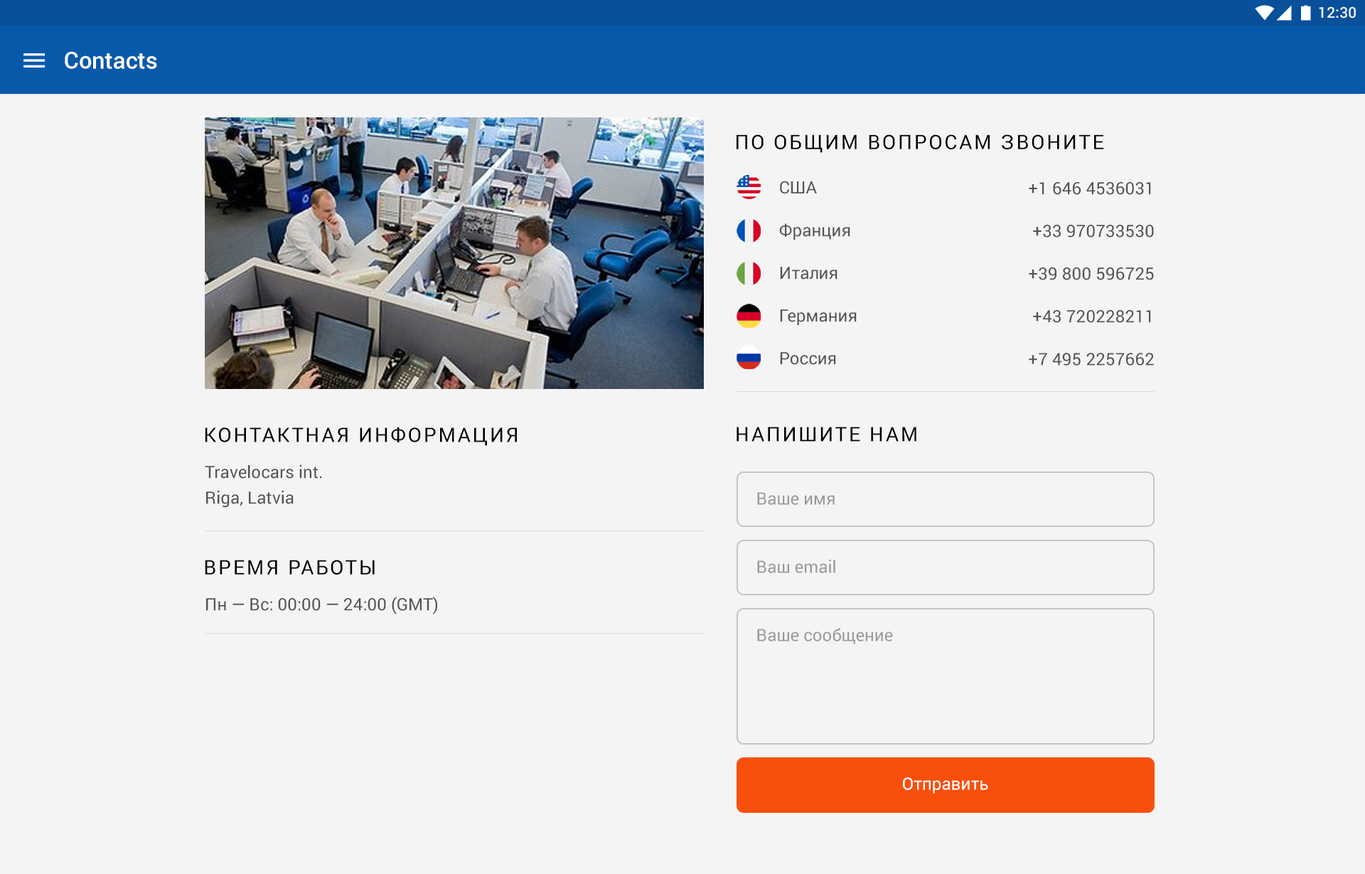
<style>
.page{position:relative;width:1365px;height:874px;background:#f4f4f4}
.page>*{position:absolute;margin:0}
.t1{font:14.9px "Roboto-Medium";color:#e7eef5}
.t2{font:23.3px "Roboto-Medium";color:#ffffff}
.t3{font:19.9px "Roboto-Regular";letter-spacing:0.1em;color:#000000}
.t4{font:17.1px/42.7px "Roboto-Regular";color:#545454}
.t5{font:17.1px/25.6px "Roboto-Regular";color:#545454}
.t6{font:17.1px "Roboto-Regular";color:#9a9a9a}
.t7{font:17.1px "Roboto-Regular";color:#545454}
.t8{font:17.1px "Roboto-Regular";color:#ffffff}
</style>
<div class="page">
<p class="t1" style="left:1319px;top:6px;width:37px;height:12px">12:30</p>
<p class="t2" style="left:65px;top:51px;width:92px;height:18px">Contacts</p>
<p class="t3" style="left:736px;top:134px;width:368px;height:19px">ПО ОБЩИМ ВОПРОСАМ ЗВОНИТЕ</p>
<p class="t4" style="left:779px;top:181px;width:78px;height:184px">США<br>Франция<br>Италия<br>Германия<br>Россия</p>
<p class="t4" style="left:1029px;top:182px;width:125px;height:183px;text-align:right">+1 646 4536031<br>+33 970733530<br>+39 800 596725<br>+43 720228211<br>+7 495 2257662</p>
<p class="t3" style="left:205px;top:427px;width:312px;height:19px">КОНТАКТНАЯ ИНФОРМАЦИЯ</p>
<p class="t3" style="left:736px;top:427px;width:180px;height:14px">НАПИШИТЕ НАМ</p>
<p class="t5" style="left:205px;top:464px;width:117px;height:44px">Travelocars int.<br>Riga, Latvia</p>
<p class="t6" style="left:757px;top:492px;width:78px;height:13px">Ваше имя</p>
<p class="t3" style="left:205px;top:559px;width:170px;height:15px">ВРЕМЯ РАБОТЫ</p>
<p class="t6" style="left:757px;top:559px;width:78px;height:14px">Ваш email</p>
<p class="t7" style="left:206px;top:596px;width:231px;height:18px">Пн — Вс: 00:00 — 24:00 (GMT)</p>
<p class="t6" style="left:757px;top:628px;width:136px;height:16px">Ваше сообщение</p>
<p class="t8" style="left:903px;top:777px;width:85px;height:16px">Отправить</p>
</div>
